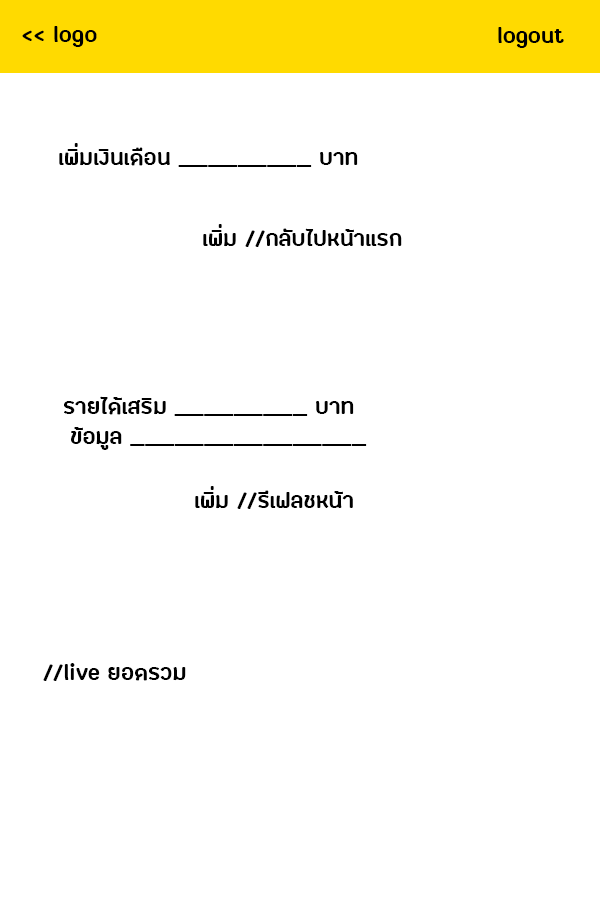
<style>
.page{position:relative;width:600px;height:900px;background:#ffffff}
.page>*{position:absolute;margin:0}
.t1{font:30px "FCLamoonBold";color:#000000}
</style>
<div class="page">
<p class="t1" style="left:22px;top:26px;width:75px;height:21px">&lt;&lt; logo</p>
<p class="t1" style="left:498px;top:27px;width:66px;height:21px">logout</p>
<p class="t1" style="left:59px;top:143px;width:299px;height:24px">เพิ่มเงินเดือน _________ บาท</p>
<p class="t1" style="left:203px;top:224px;width:199px;height:23px">เพิ่ม //กลับไปหน้าแรก</p>
<p class="t1" style="left:64px;top:396px;width:290px;height:20px">รายได้เสริม _________ บาท</p>
<p class="t1" style="left:71px;top:427px;width:296px;height:23px">ข้อมูล ________________</p>
<p class="t1" style="left:195px;top:486px;width:158px;height:23px">เพิ่ม //รีเฟลชหน้า</p>
<p class="t1" style="left:43px;top:663px;width:143px;height:18px">//live ยอดรวม</p>
</div>
